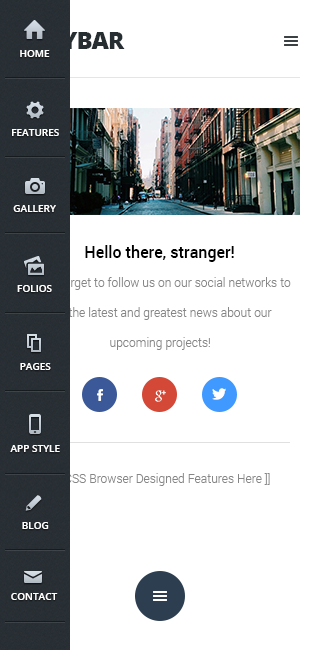
<style>
.page{position:relative;width:320px;height:650px;background:#ffffff}
.page>*{position:absolute;margin:0}
.t1{font:24px "OpenSans-Extrabold";letter-spacing:-0.04em;color:#272e32}
.t2{font:10px "OpenSans-Semibold";color:#fefefe}
.t3{font:16px "Roboto-Medium";color:#000000}
.t4{font:12px "Roboto-Light";color:#868686}
</style>
<div class="page">
<p class="t1" style="left:22px;top:32px;width:103px;height:17px">TINYBAR</p>
<p class="t2" style="left:20px;top:50px;width:30px;height:7px">HOME</p>
<p class="t2" style="left:12px;top:129px;width:47px;height:7px">FEATURES</p>
<p class="t2" style="left:13px;top:205px;width:43px;height:7px">GALLERY</p>
<p class="t3" style="left:85px;top:245px;width:149px;height:17px">Hello there, stranger!</p>
<p class="t2" style="left:17px;top:285px;width:35px;height:7px">FOLIOS</p>
<p class="t2" style="left:20px;top:363px;width:31px;height:7px">PAGES</p>
<p class="t2" style="left:10px;top:445px;width:50px;height:7px">APP STYLE</p>
<p class="t4" style="left:56px;top:473px;width:214px;height:13px">[[ CSS Browser Designed Features Here ]]</p>
<p class="t2" style="left:22px;top:522px;width:27px;height:7px">BLOG</p>
<p class="t2" style="left:11px;top:593px;width:47px;height:7px">CONTACT</p>
</div>
